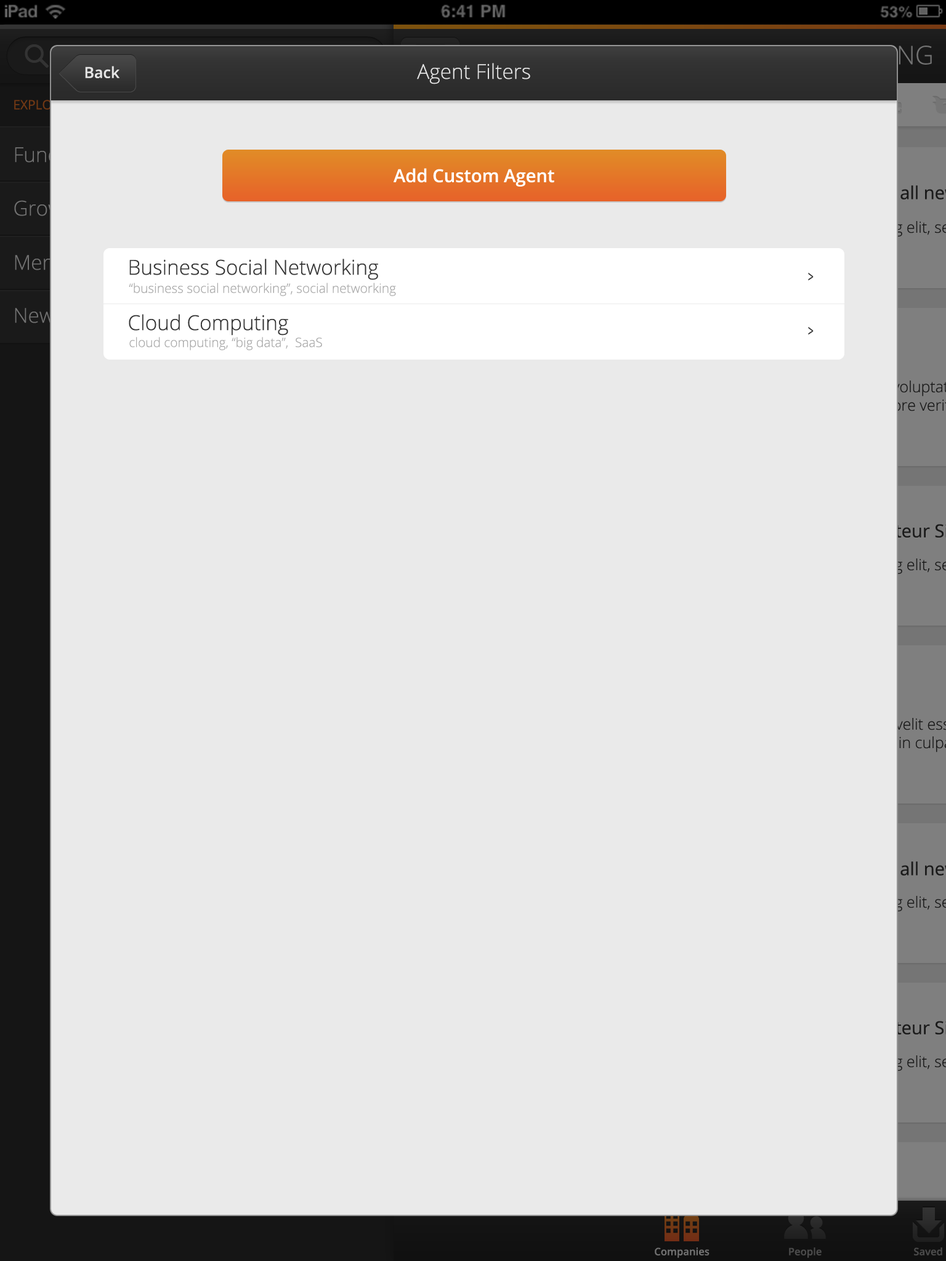
<style>
.page{position:relative;width:946px;height:1261px;background:#eaeaea}
.page>*{position:absolute;margin:0}
.t1{font:15.4px "OpenSans-Semibold";color:#e5e5e5}
.t2{font:20.5px "OpenSans-Light";color:#e5e5e5}
.t3{font:18px "OpenSans-Semibold";color:#ffffff}
.t4{font:20.5px "OpenSans-Light";color:#343434}
.t5{font:15.4px "OpenSans";color:#343434;scale:0.64 1}
.t6{font:12.8px "OpenSans-Light";color:#aaaaaa}
</style>
<div class="page">
<p class="t1" style="left:85px;top:66px;width:35px;height:12px">Back</p>
<p class="t2" style="left:417px;top:63px;width:113px;height:21px">Agent Filters</p>
<p class="t3" style="left:393px;top:168px;width:161px;height:19px">Add Custom Agent</p>
<p class="t4" style="left:129px;top:259px;width:249px;height:21px">Business Social Networking</p>
<p class="t5" style="left:808px;top:273px;width:5px;height:8px">&gt;</p>
<p class="t6" style="left:129px;top:283px;width:267px;height:13px">“business social networking”, social networking</p>
<p class="t4" style="left:129px;top:314px;width:159px;height:22px">Cloud Computing</p>
<p class="t5" style="left:808px;top:327px;width:5px;height:8px">&gt;</p>
<p class="t6" style="left:129px;top:337px;width:193px;height:13px">cloud computing, “big data”,  SaaS</p>
</div>
